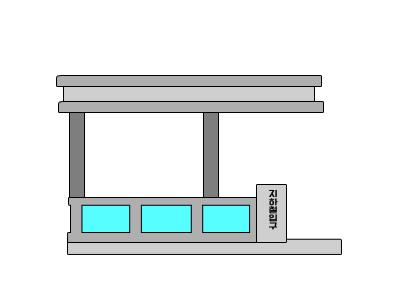
<style>
.page{position:relative;width:400px;height:300px;background:#ffffff}
.page>*{position:absolute;margin:0}
.t1{font:7.3px/8px "BMDoHyeon";color:#000000;scale:1.3 1}
</style>
<div class="page">
<p class="t1" style="left:269px;top:190px;width:9px;height:40px;text-align:center">지<br>하<br>철<br>입<br>구</p>
</div>
